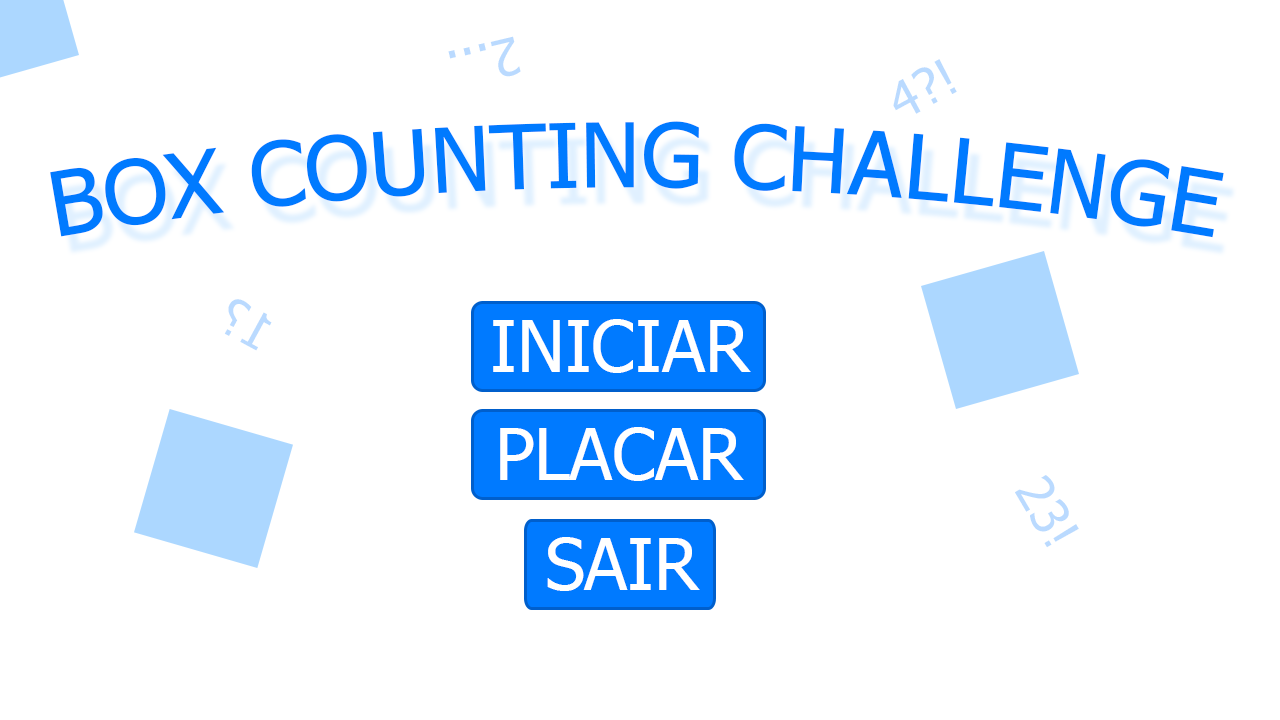
<style>
.page{position:relative;width:1280px;height:720px;background:#ffffff}
.page>*{position:absolute;margin:0}
.t1{font:50.8px "Tahoma";color:#badaff}
.t2{font:90px "Tahoma";color:#007aff}
.t3{font:50.9px "Tahoma";color:#badaff}
.t4{font:72px "Tahoma";color:#ffffff}
</style>
<div class="page">
<p class="t1" style="left:448px;top:36px;width:73px;height:41px;rotate:167deg">2...</p>
<p class="t1" style="left:893px;top:59px;width:64px;height:55px;rotate:-28deg">4?!</p>
<p class="t2" style="left:50px;top:121px;width:1174px;height:117px">BOX COUNTING CHALLENGE</p>
<p class="t3" style="left:224px;top:299px;width:48px;height:52px;rotate:-152deg">1?</p>
<p class="t4" style="left:493px;top:319px;width:258px;height:54px">INICIAR</p>
<p class="t4" style="left:500px;top:427px;width:244px;height:54px">PLACAR</p>
<p class="t1" style="left:1015px;top:475px;width:64px;height:73px;rotate:60deg">23!</p>
<p class="t4" style="left:547px;top:537px;width:153px;height:54px">SAIR</p>
</div>
